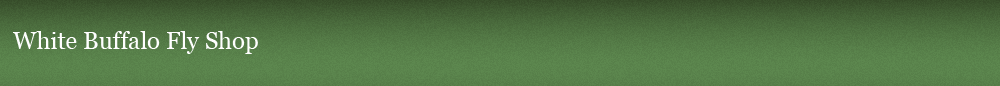
<style>
.page{position:relative;width:1000px;height:86px}
.page>*{position:absolute;margin:0}
.t1{font:24px "Georgia";color:#ffffff}
</style>
<div class="page">
<p class="t1" style="left:13px;top:31px;width:245px;height:23px">White Buffalo Fly Shop</p>
</div>
